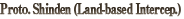
<style>
.page{position:relative;width:184px;height:19px;background:#ffffff}
.page>*{position:absolute;margin:0}
.t1{font:14px "RyuminPro-ExBold";letter-spacing:-0.08em;color:#4a3f32;font-weight:bold;scale:0.8 1}
</style>
<div class="page">
<p class="t1" style="left:0px;top:3px;width:181px;height:14px">Proto. Shinden (Land-based Intercep.)</p>
</div>
